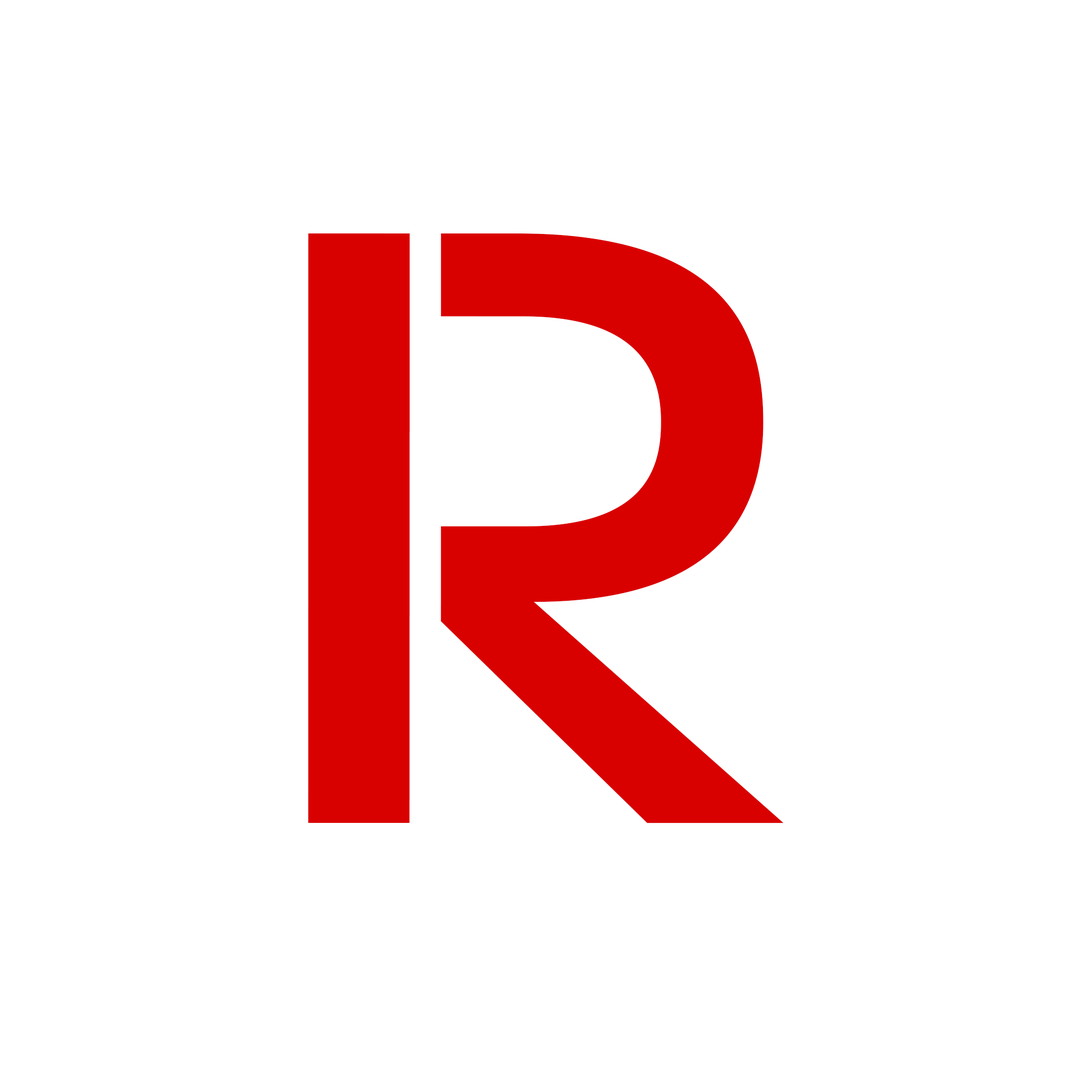
<style>
.page{position:relative;width:1092px;height:1092px;background:#ffffff}
.page>*{position:absolute;margin:0}
.t1{font:921px "ParalucentStencil-Medium";color:#d90000}
</style>
<div class="page">
<p class="t1" style="left:308px;top:233px;width:476px;height:590px">R</p>
</div>
